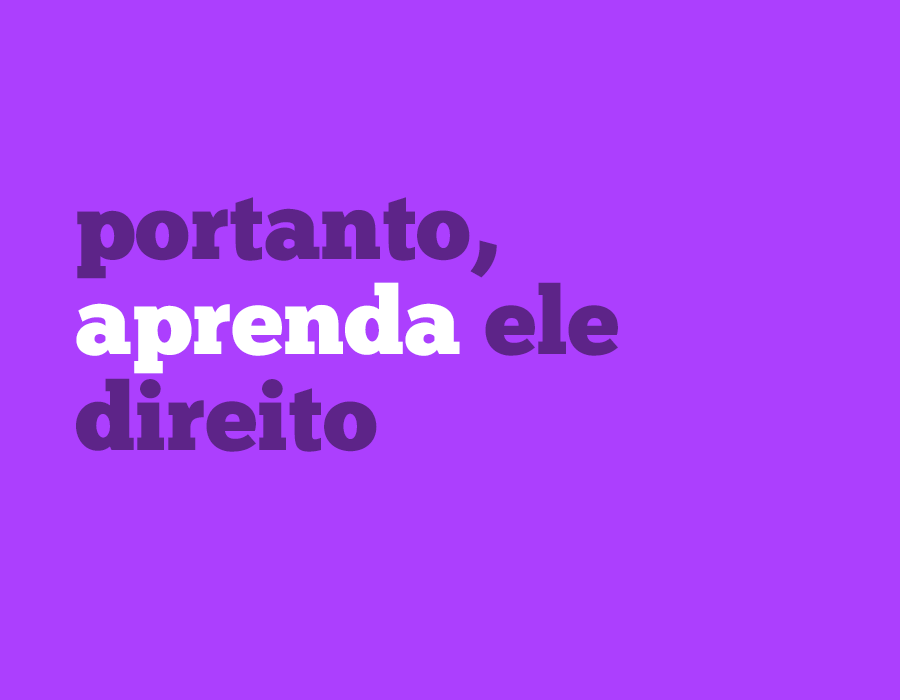
<style>
.page{position:relative;width:900px;height:700px;background:#ac3ffe}
.page>*{position:absolute;margin:0}
.t1{font:94.9px/95.9px "ChunkFive-Roman";color:#5d2488}
.t2{font:94.9px/95.9px "ChunkFive-Roman";color:#ffffff}
</style>
<div class="page">
<p class="t1" style="left:76px;top:197px;width:542px;height:255px">portanto,<br><span class="t2">aprenda</span> ele<br>direito</p>
</div>
